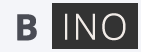
<style>
.page{position:relative;width:141px;height:52px;background:#333333}
.page>*{position:absolute;margin:0}
.t1{font:36px "OpenSans-Bold";letter-spacing:0.025em;color:#4a4c55;font-weight:bold}
.t2{font:36px "OpenSans-Light";letter-spacing:0.025em;color:#f1ebe7;font-weight:bold}
</style>
<div class="page">
<p class="t1" style="left:17px;top:14px;width:20px;height:27px">B</p>
<p class="t2" style="left:65px;top:13px;width:61px;height:28px">INO</p>
</div>
